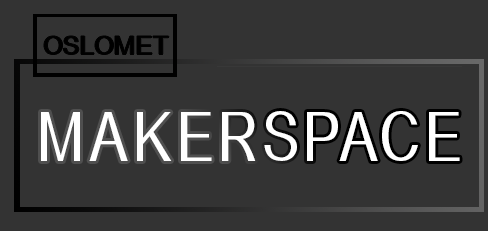
<style>
.page{position:relative;width:488px;height:231px;background:#333333}
.page>*{position:absolute;margin:0}
.t1{font:25.2px "Alido";color:#000000;font-weight:bold;scale:1.11 1}
.t2{font:72px "Alido";letter-spacing:0.1em;color:#ffffff;scale:0.83 1}
</style>
<div class="page">
<p class="t1" style="left:44px;top:36px;width:125px;height:19px">OSLOMET</p>
<p class="t2" style="left:41px;top:111px;width:419px;height:50px">MAKERSPACE</p>
</div>
